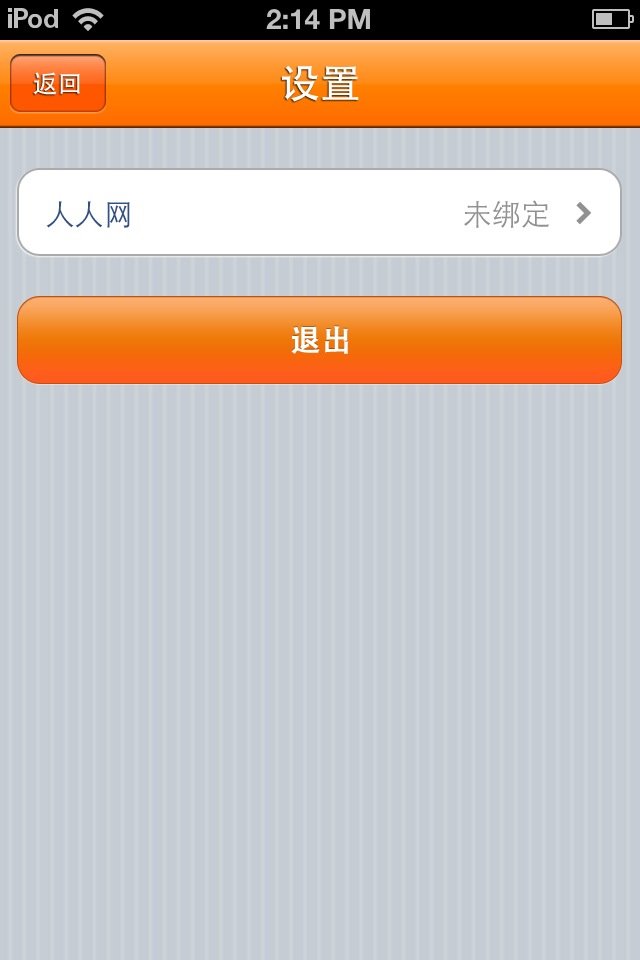
<style>
.page{position:relative;width:640px;height:960px;background:#c5ccd4}
.page>*{position:absolute;margin:0}
.t1{font:40px "STHeitiSC-Medium";color:#ffffff}
.t2{font:25px "STHeitiSC-Medium";color:#ffffff}
.t3{font:30px "STHeitiSC-Light";color:#324f85;scale:0.97 1}
.t4{font:30px "STHeitiSC-Light";color:#919191;scale:0.97 1}
.t5{font:30px "AdobeHeitiStd-Regular";color:#ffffff;font-weight:bold}
</style>
<div class="page">
<p class="t1" style="left:282px;top:65px;width:77px;height:37px">设置</p>
<p class="t2" style="left:33px;top:72px;width:47px;height:23px">返回</p>
<p class="t3" style="left:46px;top:201px;width:84px;height:27px">人人网</p>
<p class="t4" style="left:464px;top:200px;width:85px;height:28px">未绑定</p>
<p class="t5" style="left:291px;top:326px;width:58px;height:28px">退出</p>
</div>
